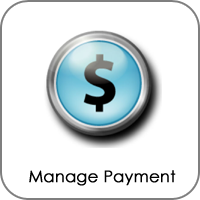
<style>
.page{position:relative;width:200px;height:200px;background:#ffffff}
.page>*{position:absolute;margin:0}
.t1{font:16px "CenturyGothic";color:#000000;font-weight:bold}
</style>
<div class="page">
<p class="t1" style="left:29px;top:170px;width:147px;height:16px">Manage Payment</p>
</div>
